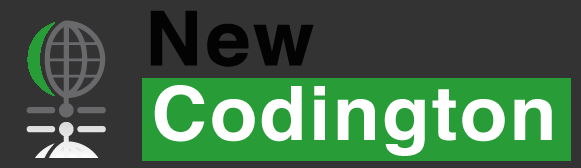
<style>
.page{position:relative;width:581px;height:168px;background:#333333}
.page>*{position:absolute;margin:0}
.t1{font:75px "Helvetica-Bold";letter-spacing:0.025em;color:#030303;font-weight:bold;scale:1.04 1}
.t2{font:75px "Helvetica-Bold";letter-spacing:0.025em;color:#ffffff;scale:1.04 1}
.t3{font:75px "Helvetica-Bold";letter-spacing:0.025em;color:#030303;scale:1.04 1}
</style>
<div class="page">
<p class="t1" style="left:150px;top:10px;width:164px;height:57px">New</p>
<p class="t2" style="left:154px;top:85px;width:398px;height:71px"><span class="t3"><br></span>Codington</p>
</div>
